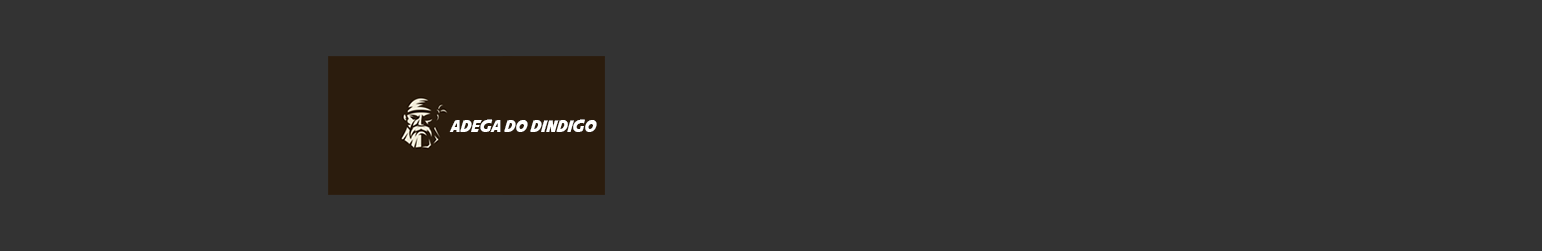
<style>
.page{position:relative;width:1542px;height:251px;background:#333333}
.page>*{position:absolute;margin:0}
.t1{font:16px "AvengeanceMightiestAvenger";color:#ffffff}
</style>
<div class="page">
<p class="t1" style="left:449px;top:119px;width:148px;height:13px">ADEGA DO DINDIGO</p>
</div>
